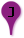
<style>
.page{position:relative;width:24px;height:38px;background:#ffffff}
.page>*{position:absolute;margin:0}
.t1{font:14px "Tahoma-Bold";letter-spacing:-0.025em;color:#000000}
</style>
<div class="page">
<p class="t1" style="left:8px;top:7px;width:6px;height:10px">J</p>
</div>
